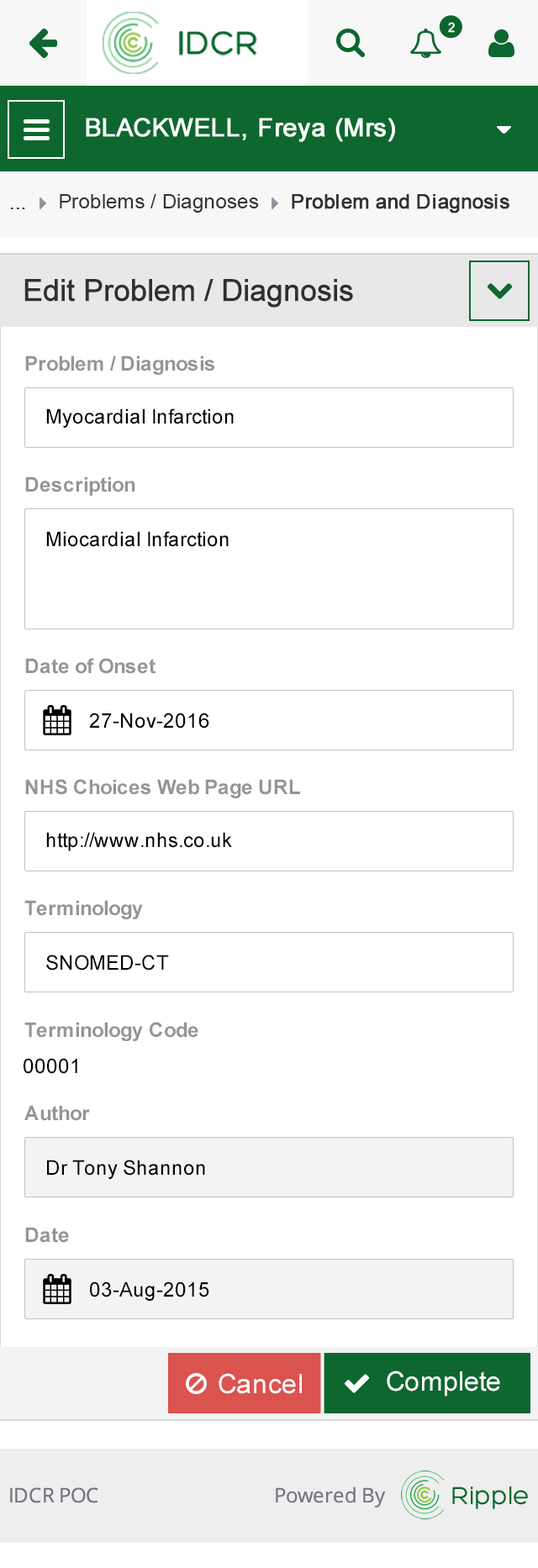
<style>
.page{position:relative;width:538px;height:1568px;background:#ffffff}
.page>*{position:absolute;margin:0}
.t1{font:20.2px "ArialMT";color:#313131}
.t2{font:20.2px "ArialMT";color:#313131;font-weight:bold}
.t3{font:30.3px "ArialMT";color:#303030;font-weight:bold}
.t4{font:20.2px "Arial-BoldMT";color:#959595}
.t5{font:20.2px "ArialMT";color:#000000}
.t6{font:26.9px "ArialMT";color:#ffffff}
</style>
<div class="page">
<p class="t1" style="left:60px;top:194px;width:199px;height:19px">Problems / Diagnoses</p>
<p class="t2" style="left:292px;top:194px;width:217px;height:19px">Problem and Diagnosis</p>
<p class="t1" style="left:11px;top:208px;width:14px;height:1px">...</p>
<p class="t3" style="left:24px;top:279px;width:329px;height:29px">Edit Problem / Diagnosis</p>
<p class="t4" style="left:25px;top:355px;width:189px;height:20px">Problem / Diagnosis</p>
<p class="t5" style="left:46px;top:408px;width:188px;height:20px">Myocardial Infarction</p>
<p class="t4" style="left:25px;top:476px;width:110px;height:20px">Description</p>
<p class="t5" style="left:46px;top:531px;width:183px;height:16px">Miocardial Infarction</p>
<p class="t4" style="left:25px;top:658px;width:130px;height:16px">Date of Onset</p>
<p class="t5" style="left:89px;top:713px;width:120px;height:16px">27-Nov-2016</p>
<p class="t4" style="left:25px;top:779px;width:275px;height:19px">NHS Choices Web Page URL</p>
<p class="t5" style="left:46px;top:832px;width:186px;height:19px">http://www.nhs.co.uk</p>
<p class="t4" style="left:24px;top:900px;width:119px;height:19px">Terminology</p>
<p class="t5" style="left:46px;top:955px;width:123px;height:16px">SNOMED-CT</p>
<p class="t4" style="left:24px;top:1022px;width:174px;height:19px">Terminology Code</p>
<p class="t5" style="left:24px;top:1058px;width:53px;height:16px">00001</p>
<p class="t4" style="left:24px;top:1105px;width:66px;height:16px">Author</p>
<p class="t5" style="left:47px;top:1160px;width:158px;height:19px">Dr Tony Shannon</p>
<p class="t4" style="left:25px;top:1227px;width:44px;height:16px">Date</p>
<p class="t5" style="left:90px;top:1281px;width:119px;height:20px">03-Aug-2015</p>
<p class="t6" style="left:218px;top:1373px;width:84px;height:21px">Cancel</p>
<p class="t6" style="left:387px;top:1371px;width:113px;height:26px">Complete</p>
</div>
